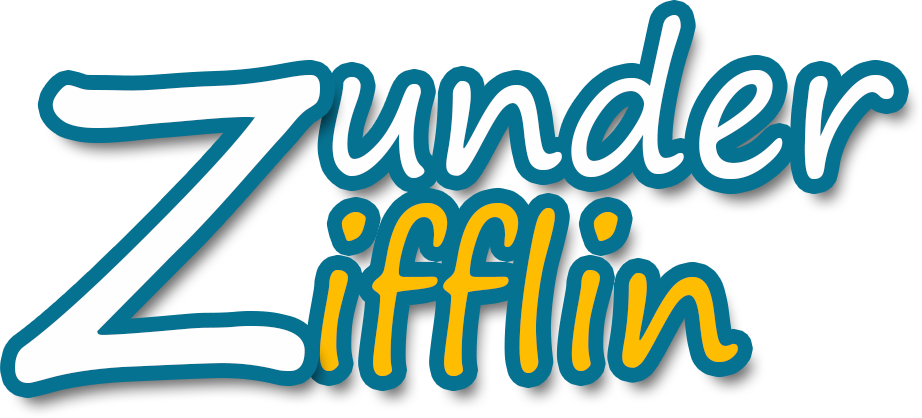
<style>
.page{position:relative;width:922px;height:418px;background:#ffffff}
.page>*{position:absolute;margin:0}
.t1{font:190.5px "SegoePrint";color:#fefefe}
.t2{font:424.8px "SegoePrint";color:#fefefe}
.t3{font:190.5px "SegoePrint";color:#ffbd01}
</style>
<div class="page">
<p class="t1" style="left:332px;top:15px;width:562px;height:164px">under</p>
<p class="t2" style="left:15px;top:75px;width:305px;height:308px">Z</p>
<p class="t3" style="left:319px;top:203px;width:419px;height:173px">ifflin</p>
</div>
